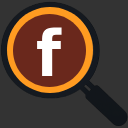
<style>
.page{position:relative;width:128px;height:128px;background:#333333}
.page>*{position:absolute;margin:0}
.t1{font:64px "DejaVuSansCondensed-Bold";color:#ffffff}
</style>
<div class="page">
<p class="t1" style="left:37px;top:27px;width:25px;height:49px">f</p>
</div>
